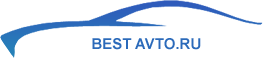
<style>
.page{position:relative;width:263px;height:59px;background:#ffffff}
.page>*{position:absolute;margin:0}
.t1{font:15px "Arial-BoldMT";color:#2b6aba;text-transform:uppercase}
</style>
<div class="page">
<p class="t1" style="left:92px;top:38px;width:109px;height:12px">BEST AVTO.RU</p>
</div>
